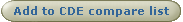
<style>
.page{position:relative;width:183px;height:22px}
.page>*{position:absolute;margin:0}
.t1{font:11px "Verdana-Bold";color:#336699}
</style>
<div class="page">
<p class="t1" style="left:14px;top:6px;width:155px;height:11px">Add to CDE compare list</p>
</div>
